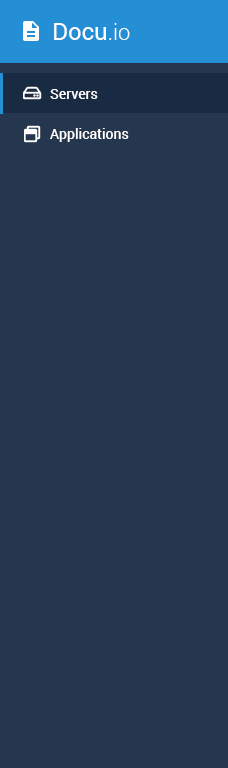
<style>
.page{position:relative;width:228px;height:768px;background:#25364f}
.page>*{position:absolute;margin:0}
.t1{font:24px "Roboto-Regular";color:#ffffff}
.t2{font:22px "Roboto-Light";color:#ffffff}
.t3{font:14px "Roboto-Medium";color:#ffffff}
</style>
<div class="page">
<p class="t1" style="left:54px;top:23px;width:76px;height:17px">Docu<span class="t2">.io</span></p>
<p class="t3" style="left:50px;top:89px;width:48px;height:10px">Servers</p>
<p class="t3" style="left:50px;top:128px;width:79px;height:14px">Applications</p>
</div>
